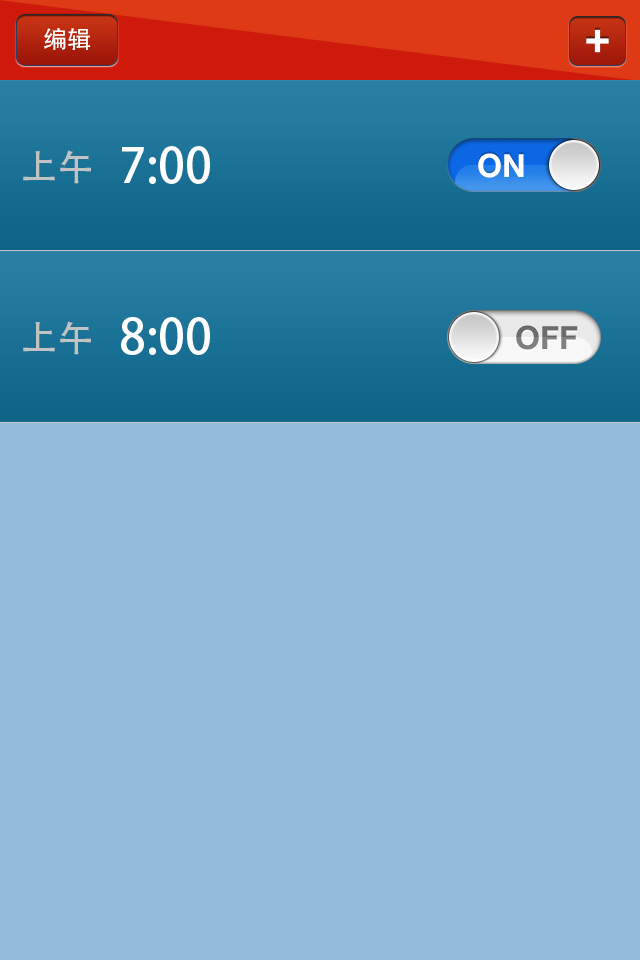
<style>
.page{position:relative;width:640px;height:960px;background:#93bcdb}
.page>*{position:absolute;margin:0}
.t1{font:24px "AdobeHeitiStd-Regular";color:#ffffff}
.t2{font:36px "AdobeHeitiStd-Regular";color:#c2c2c2}
.t3{font:48px "AdobeHeitiStd-Regular";color:#ffffff}
</style>
<div class="page">
<p class="t1" style="left:44px;top:28px;width:47px;height:22px">编辑</p>
<p class="t2" style="left:23px;top:150px;width:68px;height:34px">上午</p>
<p class="t3" style="left:122px;top:146px;width:88px;height:38px">7:00</p>
<p class="t3" style="left:121px;top:317px;width:89px;height:38px">8:00</p>
<p class="t2" style="left:23px;top:321px;width:68px;height:34px">上午</p>
</div>
